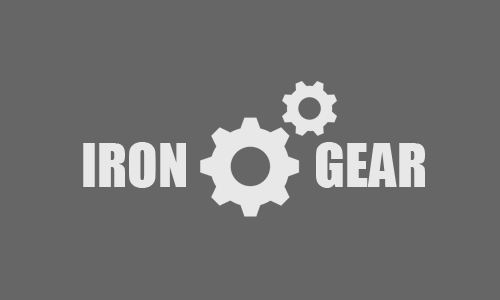
<style>
.page{position:relative;width:500px;height:300px;background:#666666}
.page>*{position:absolute;margin:0}
.t1{font:56px "Impact";color:#ffffff}
</style>
<div class="page">
<p class="t1" style="left:83px;top:142px;width:103px;height:46px;opacity:0.85">IRON</p>
<p class="t1" style="left:316px;top:142px;width:109px;height:46px;opacity:0.85">GEAR</p>
</div>
